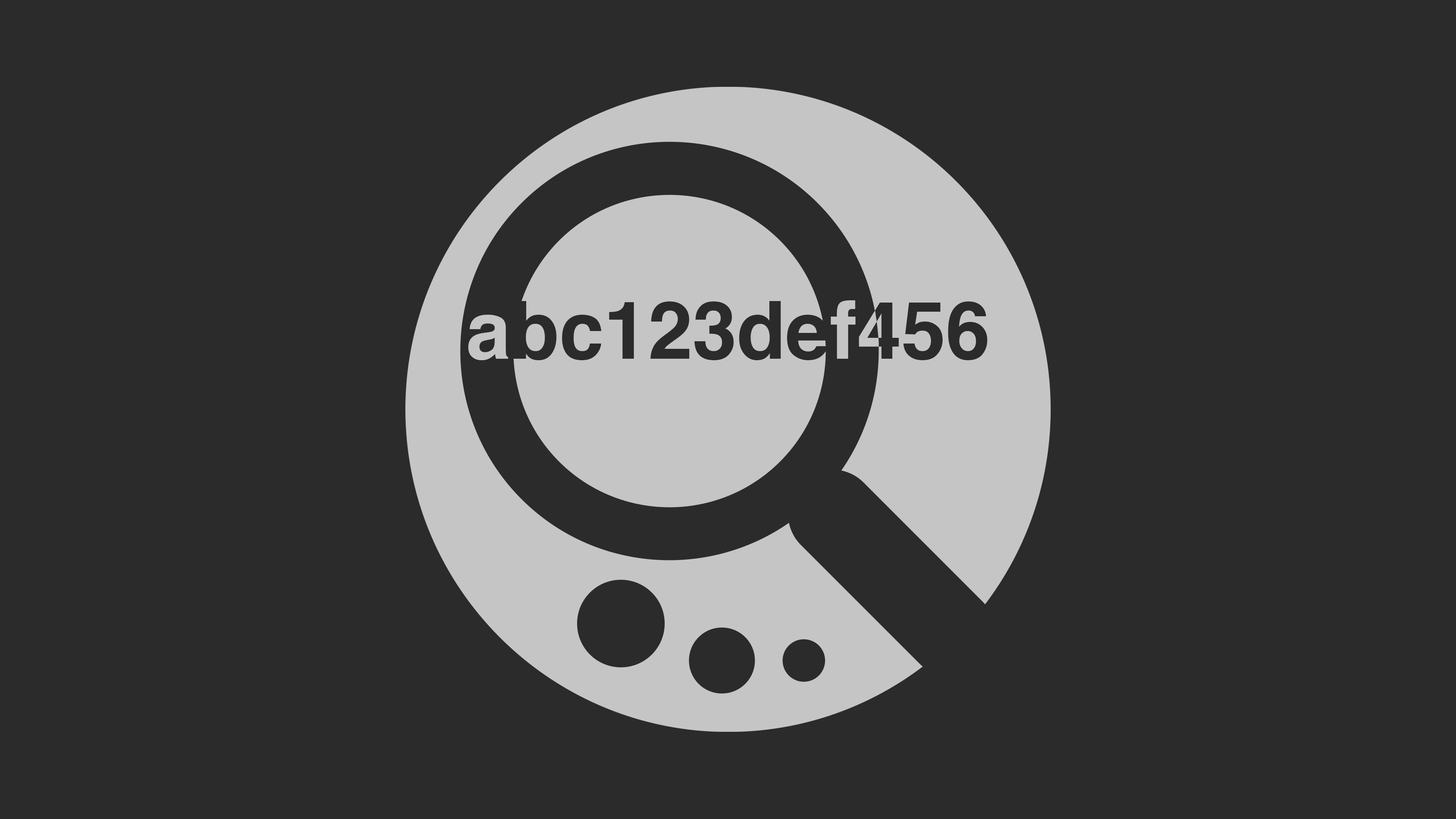
<style>
.page{position:relative;width:1456px;height:819px;background:#2b2b2b}
.page>*{position:absolute;margin:0}
.t1{font:79.9px "Helvetica-Bold";color:#272838}
.t2{font:79.9px "Helvetica-Bold";color:#2b2b2b}
</style>
<div class="page">
<p class="t1" style="left:468px;top:300px;width:519px;height:60px">abc123def456</p>
<p class="t2" style="left:468px;top:300px;width:519px;height:60px">abc123def456</p>
</div>
